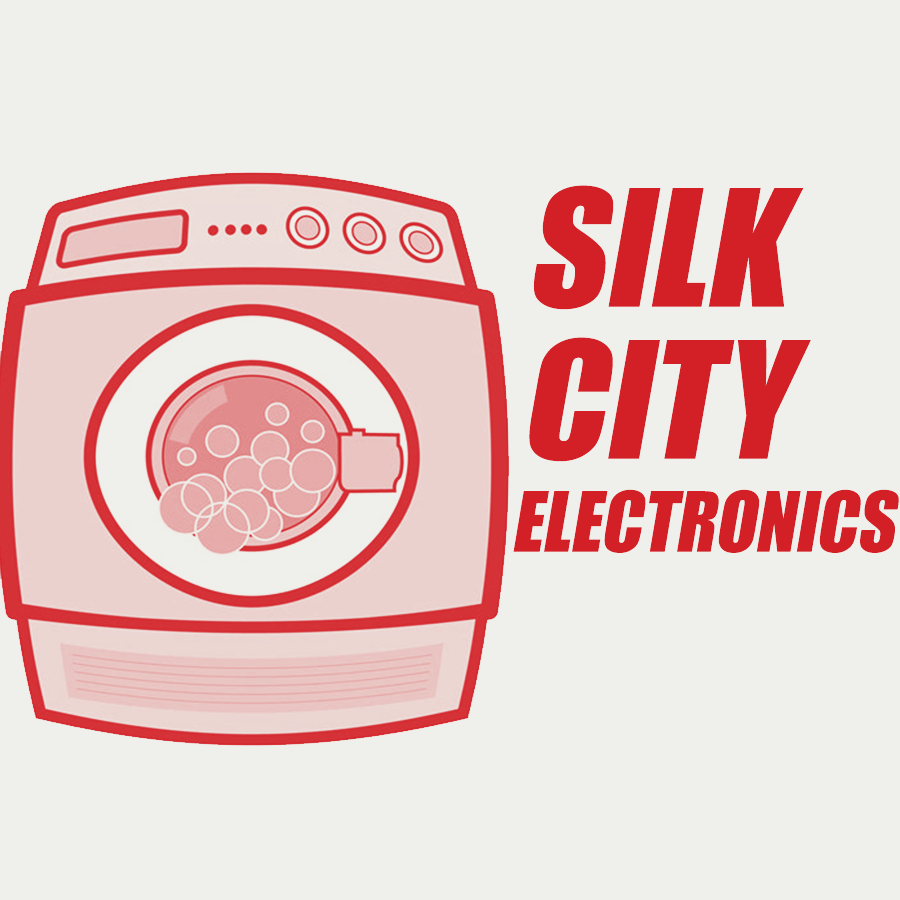
<style>
.page{position:relative;width:900px;height:900px;background:#eff0eb}
.page>*{position:absolute;margin:0}
.t1{font:150px "Impact";color:#d32027;text-transform:uppercase;font-style:italic}
.t2{font:76.8px "Impact";color:#d32027;text-transform:uppercase;font-style:italic;scale:0.96 1}
</style>
<div class="page">
<p class="t1" style="left:533px;top:185px;width:271px;height:125px">Silk</p>
<p class="t1" style="left:529px;top:337px;width:282px;height:125px">City</p>
<p class="t2" style="left:513px;top:489px;width:386px;height:64px">Electronics</p>
</div>
